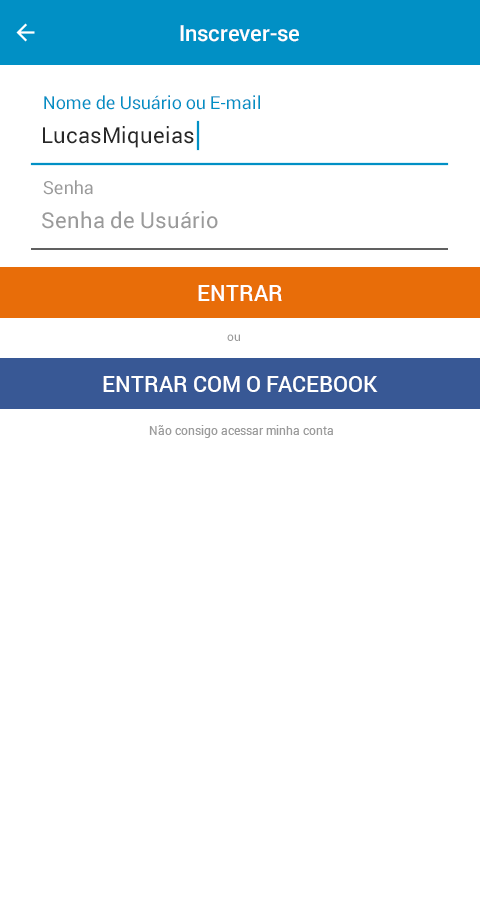
<style>
.page{position:relative;width:480px;height:898px;background:#ffffff}
.page>*{position:absolute;margin:0}
.t1{font:22px "Roboto-Medium";color:#ffffff}
.t2{font:18px "Roboto-Regular";color:#0190c5}
.t3{font:22px "Roboto-Regular";color:#272727}
.t4{font:18px "Roboto-Regular";color:#9a9a9a}
.t5{font:22px "Roboto-Regular";color:#9a9a9a}
.t6{font:12px "Roboto-Regular";color:#9a9a9a}
</style>
<div class="page">
<p class="t1" style="left:180px;top:25px;width:119px;height:17px">Inscrever-se</p>
<p class="t2" style="left:44px;top:95px;width:216px;height:15px">Nome de Usuário ou E-mail</p>
<p class="t3" style="left:43px;top:126px;width:151px;height:22px">LucasMiqueias</p>
<p class="t4" style="left:43px;top:180px;width:50px;height:15px">Senha</p>
<p class="t5" style="left:42px;top:211px;width:176px;height:18px">Senha de Usuário</p>
<p class="t1" style="left:198px;top:285px;width:84px;height:16px">ENTRAR</p>
<p class="t6" style="left:227px;top:334px;width:13px;height:7px">ou</p>
<p class="t1" style="left:103px;top:376px;width:275px;height:16px">ENTRAR COM O FACEBOOK</p>
<p class="t6" style="left:149px;top:425px;width:184px;height:13px">Não consigo acessar minha conta</p>
</div>
